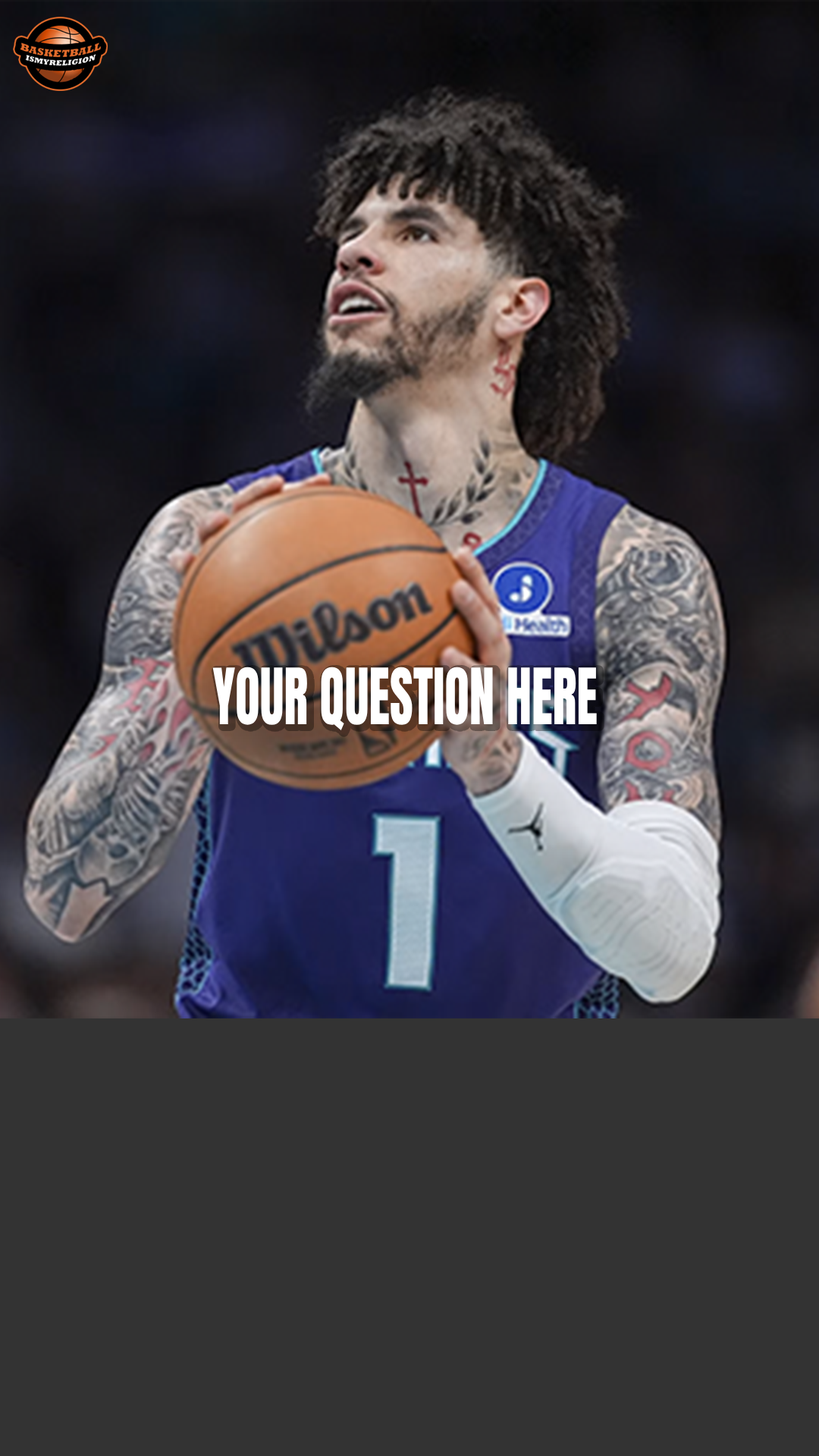
<style>
.page{position:relative;width:819px;height:1456px;background:#333333}
.page>*{position:absolute;margin:0}
.t1{font:65.9px "Impact";color:#ffffff;scale:0.77 1}
</style>
<div class="page">
<p class="t1" style="left:212px;top:667px;width:385px;height:63px">YOUR QUESTION HERE</p>
</div>
